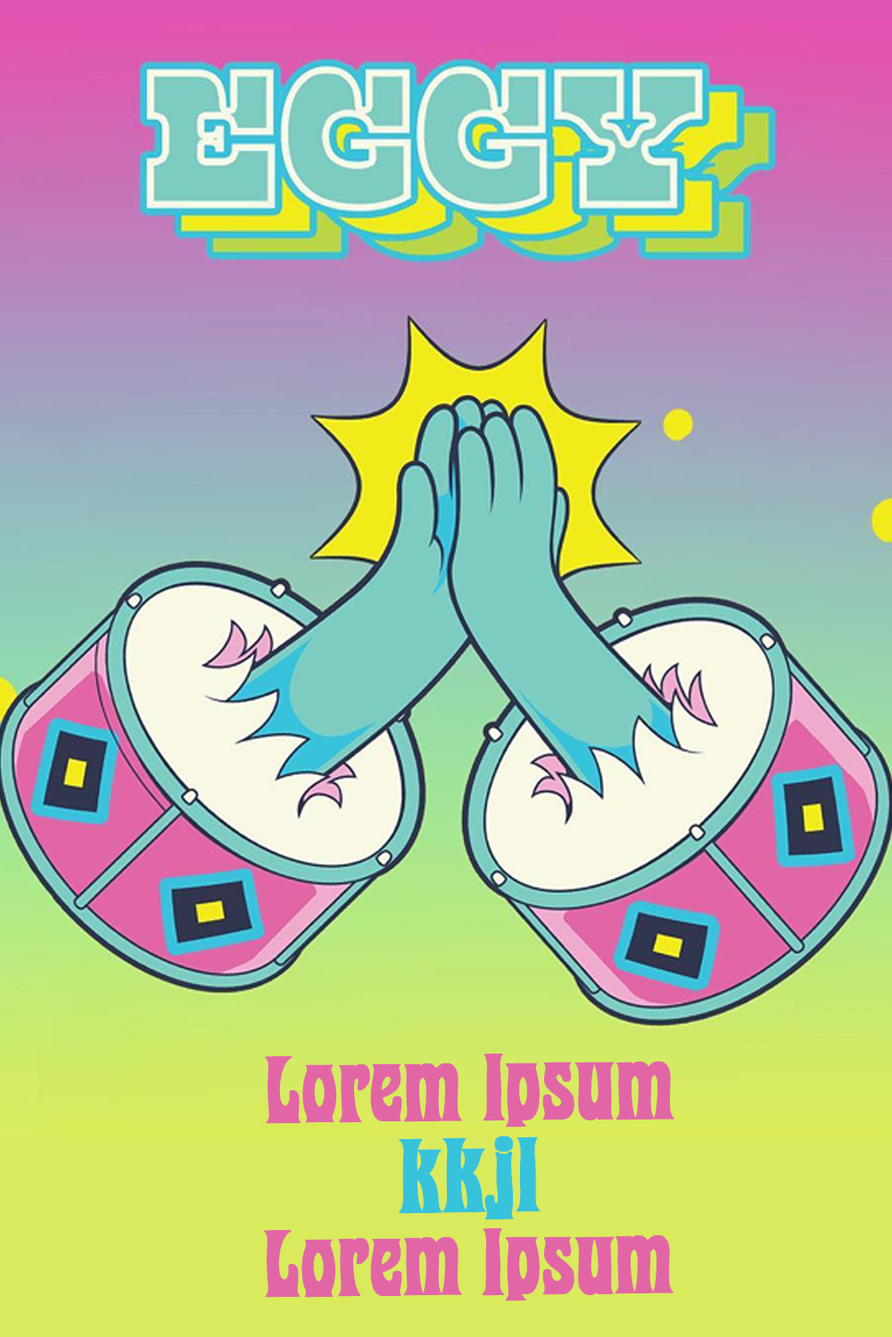
<style>
.page{position:relative;width:892px;height:1337px}
.page>*{position:absolute;margin:0}
.t1{font:80.2px "PurePsychedelia-Bold";color:#e266a6;font-weight:bold}
.t2{font:89.2px "PurePsychedelia-Bold";color:#37c3db;font-weight:bold}
</style>
<div class="page">
<p class="t1" style="left:265px;top:1054px;width:409px;height:74px;rotate:-1deg">Lorem Ipsum</p>
<p class="t2" style="left:399px;top:1136px;width:141px;height:84px;rotate:-1deg">kkjl</p>
<p class="t1" style="left:264px;top:1229px;width:409px;height:73px;rotate:-1deg">Lorem Ipsum</p>
</div>
